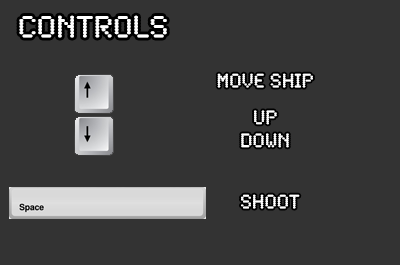
<style>
.page{position:relative;width:400px;height:265px;background:#333333}
.page>*{position:absolute;margin:0}
.t1{font:32px "SynchroLET";color:#ffffff}
.t2{font:20px/4.6px "SynchroLET";color:#ffffff}
.t3{font:20px "SynchroLET";color:#ffffff}
</style>
<div class="page">
<p class="t1" style="left:19px;top:15px;width:148px;height:23px">CONTROLS</p>
<p class="t2" style="left:217px;top:73px;width:96px;height:75px;text-align:center">move ship <br><br><br><br><br><br><br><br>UP<br><br><br><br><br>Down</p>
<p class="t3" style="left:241px;top:194px;width:59px;height:15px">SHOOT</p>
</div>
